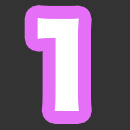
<style>
.page{position:relative;width:130px;height:130px;background:#333333}
.page>*{position:absolute;margin:0}
.t1{font:110.5px "HiraKakuStdN-W8";color:#ffffff}
</style>
<div class="page">
<p class="t1" style="left:37px;top:18px;width:42px;height:93px">１</p>
</div>
